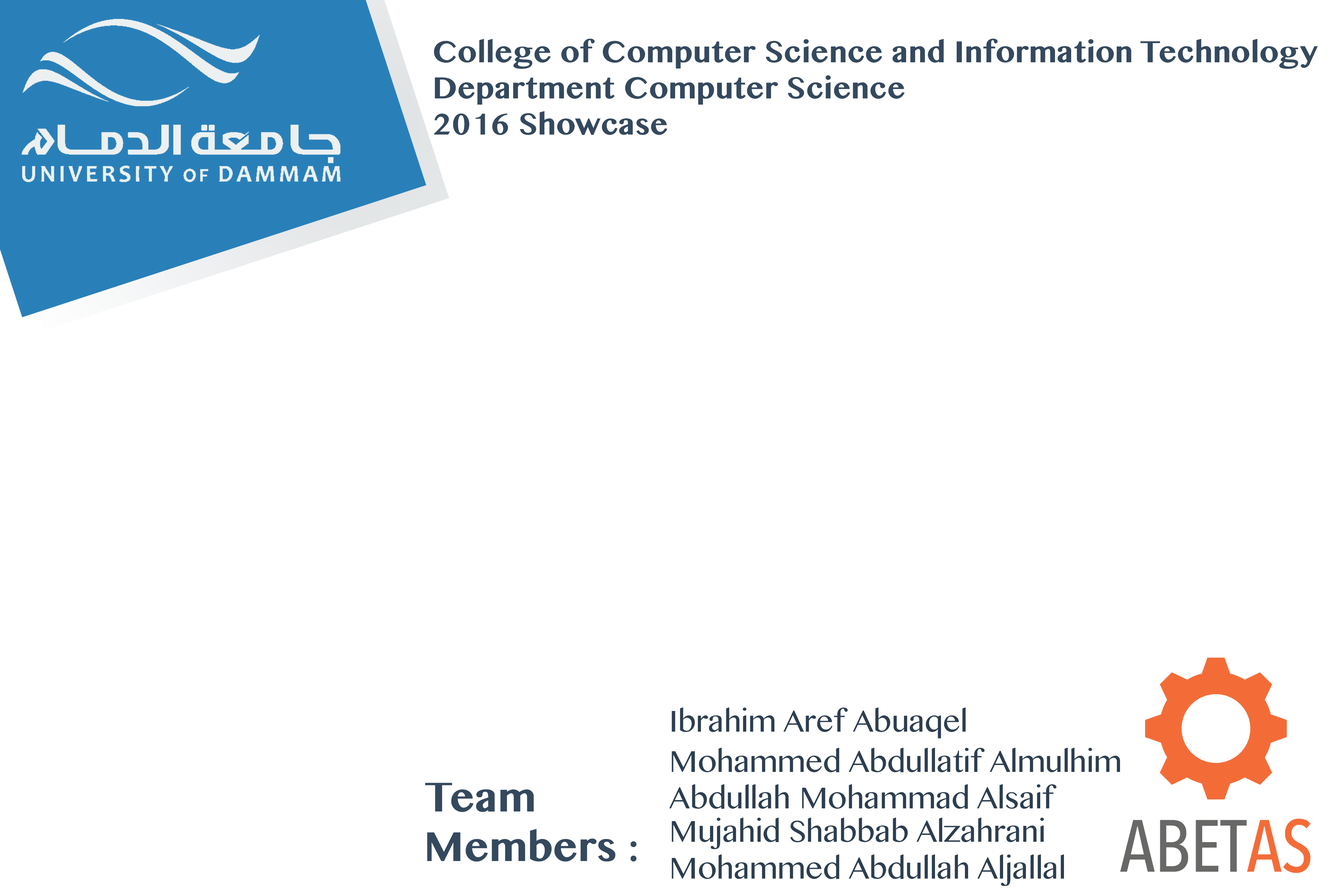
<style>
.page{position:relative;width:1337px;height:892px;background:#ffffff}
.page>*{position:absolute;margin:0}
.t1{font:30.1px "MyanmarMN-Bold";color:#34495e}
.t2{font:30.3px "MyanmarMN";color:#2c3e50}
.t3{font:41.2px "MyanmarMN-Bold";color:#34495e}
</style>
<div class="page">
<p class="t1" style="left:434px;top:39px;width:884px;height:96px">College of Computer Science and Information Technology<br>Department Computer Science<br>2016 Showcase</p>
<p class="t2" style="left:672px;top:707px;width:294px;height:31px">Ibrahim Aref Abuaqel</p>
<p class="t2" style="left:672px;top:747px;width:448px;height:25px">Mohammed Abdullatif Almulhim</p>
<p class="t3" style="left:425px;top:782px;width:212px;height:79px">Team<br>Members :</p>
<p class="t2" style="left:669px;top:784px;width:388px;height:24px">Abdullah Mohammad Alsaif</p>
<p class="t2" style="left:672px;top:817px;width:372px;height:32px">Mujahid Shabbab Alzahrani</p>
<p class="t2" style="left:672px;top:854px;width:392px;height:32px">Mohammed Abdullah Aljallal</p>
</div>
